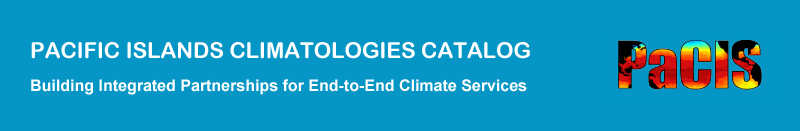
<style>
.page{position:relative;width:800px;height:131px;background:#0596c5}
.page>*{position:absolute;margin:0}
.t1{font:16px/33px "Arial-BoldMT";color:#ffffff}
.t2{font:22px/33px "ArialRoundedMTBold";color:#ffffff}
</style>
<div class="page">
<p class="t1" style="left:31px;top:42px;width:499px;height:53px"><span class="t2">PACIFIC ISLANDS CLIMATOLOGIES CATALOG<br></span>Building Integrated Partnerships for End-to-End Climate Services</p>
</div>
